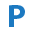
<style>
.page{position:relative;width:32px;height:32px;background:#ffffff}
.page>*{position:absolute;margin:0}
.t1{font:32.7px "MyriadPro-Bold";color:#1c79c1}
</style>
<div class="page">
<p class="t1" style="left:9px;top:5px;width:16px;height:22px">P</p>
</div>
